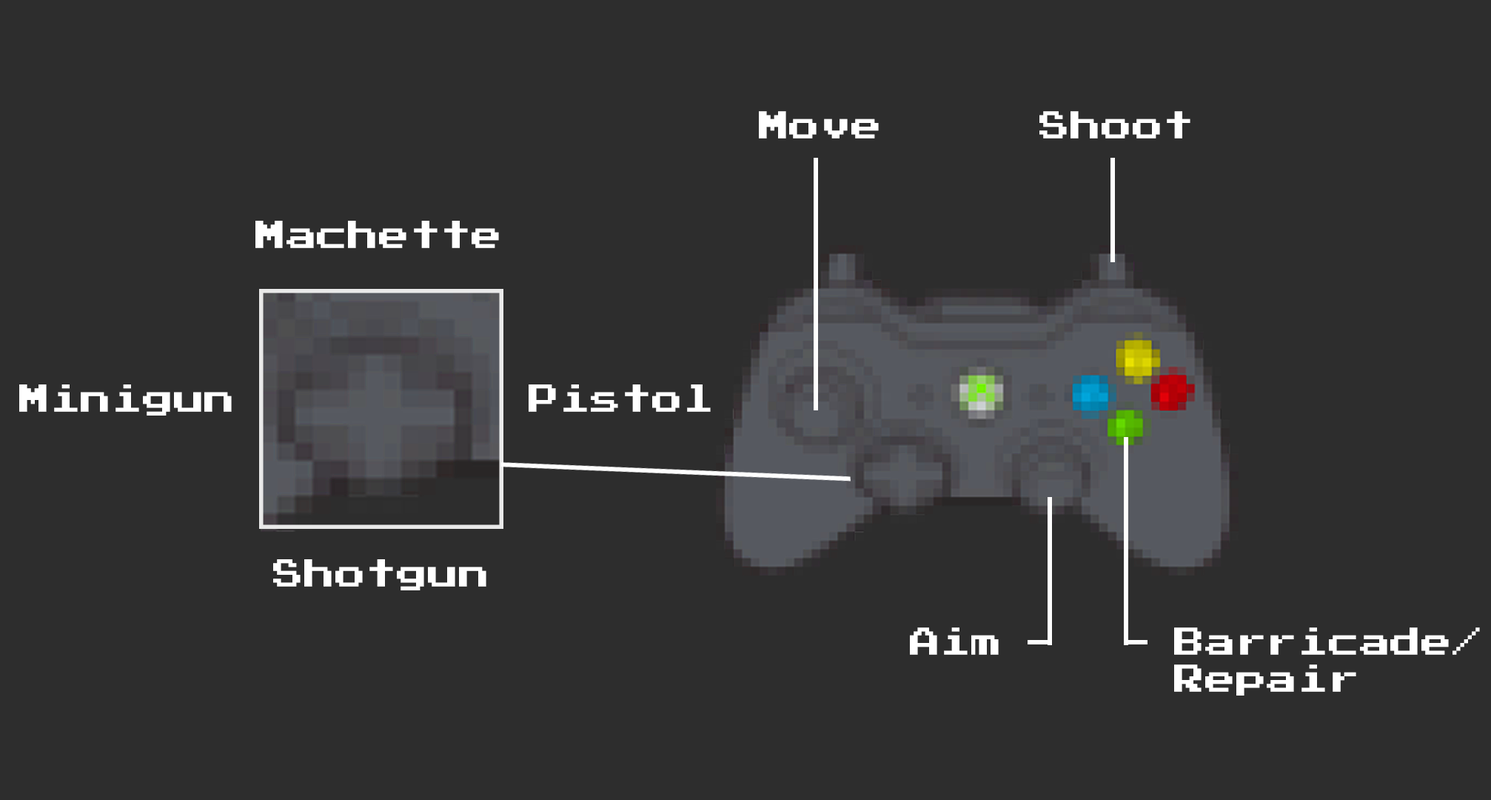
<style>
.page{position:relative;width:1491px;height:800px;background:#2d2d2d}
.page>*{position:absolute;margin:0}
.t1{font:31px "PressStart2P";color:#ffffff}
.t2{font:31.1px "PressStart2P";color:#ffffff}
</style>
<div class="page">
<p class="t1" style="left:759px;top:111px;width:120px;height:27px">Move</p>
<p class="t1" style="left:1040px;top:111px;width:151px;height:27px">Shoot</p>
<p class="t2" style="left:255px;top:221px;width:244px;height:27px">Machette</p>
<p class="t2" style="left:19px;top:384px;width:213px;height:31px">Minigun</p>
<p class="t2" style="left:529px;top:384px;width:182px;height:28px">Pistol</p>
<p class="t2" style="left:273px;top:559px;width:213px;height:31px">Shotgun</p>
<p class="t1" style="left:910px;top:627px;width:89px;height:28px">Aim</p>
<p class="t1" style="left:1174px;top:627px;width:306px;height:68px">Barricade/<br>Repair</p>
</div>
